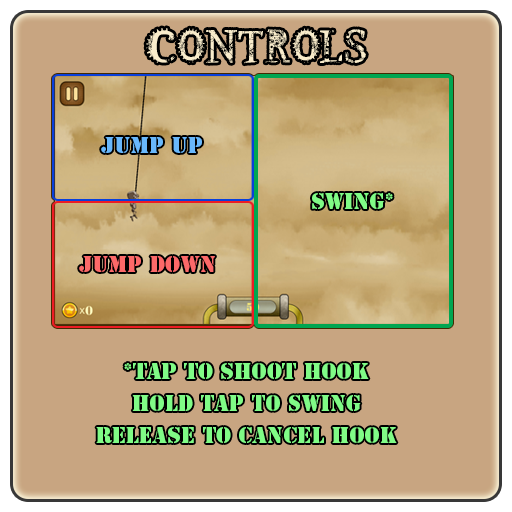
<style>
.page{position:relative;width:512px;height:512px;background:#c8a581}
.page>*{position:absolute;margin:0}
.t1{font:50px "SteampunkbyMartavanEck";letter-spacing:0.01em;color:#f9eccb}
.t2{font:21px "StencilStd";letter-spacing:0.01em;color:#69b8fc}
.t3{font:21px "StencilStd";letter-spacing:0.01em;color:#80fb86}
.t4{font:21px "StencilStd";letter-spacing:0.01em;color:#fc6969}
.t5{font:21px/32px "StencilStd";letter-spacing:0.01em;color:#80fb86}
</style>
<div class="page">
<p class="t1" style="left:146px;top:28px;width:220px;height:36px">CONTROLS</p>
<p class="t2" style="left:101px;top:137px;width:101px;height:16px">Jump Up</p>
<p class="t3" style="left:312px;top:193px;width:81px;height:16px">Swing*</p>
<p class="t4" style="left:79px;top:256px;width:136px;height:16px">Jump Down</p>
<p class="t5" style="left:96px;top:363px;width:301px;height:80px;text-align:center">*tap to Shoot hook<br>HOld Tap to swing<br>Release to Cancel Hook</p>
</div>
